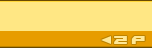
<style>
.page{position:relative;width:152px;height:48px;background:#ffe784}
.page>*{position:absolute;margin:0}
.t1{font:12.5px "Extremist";letter-spacing:-0.05em;color:#ffe794}
</style>
<div class="page">
<p class="t1" style="left:114px;top:36px;width:31px;height:8px">2P</p>
</div>
